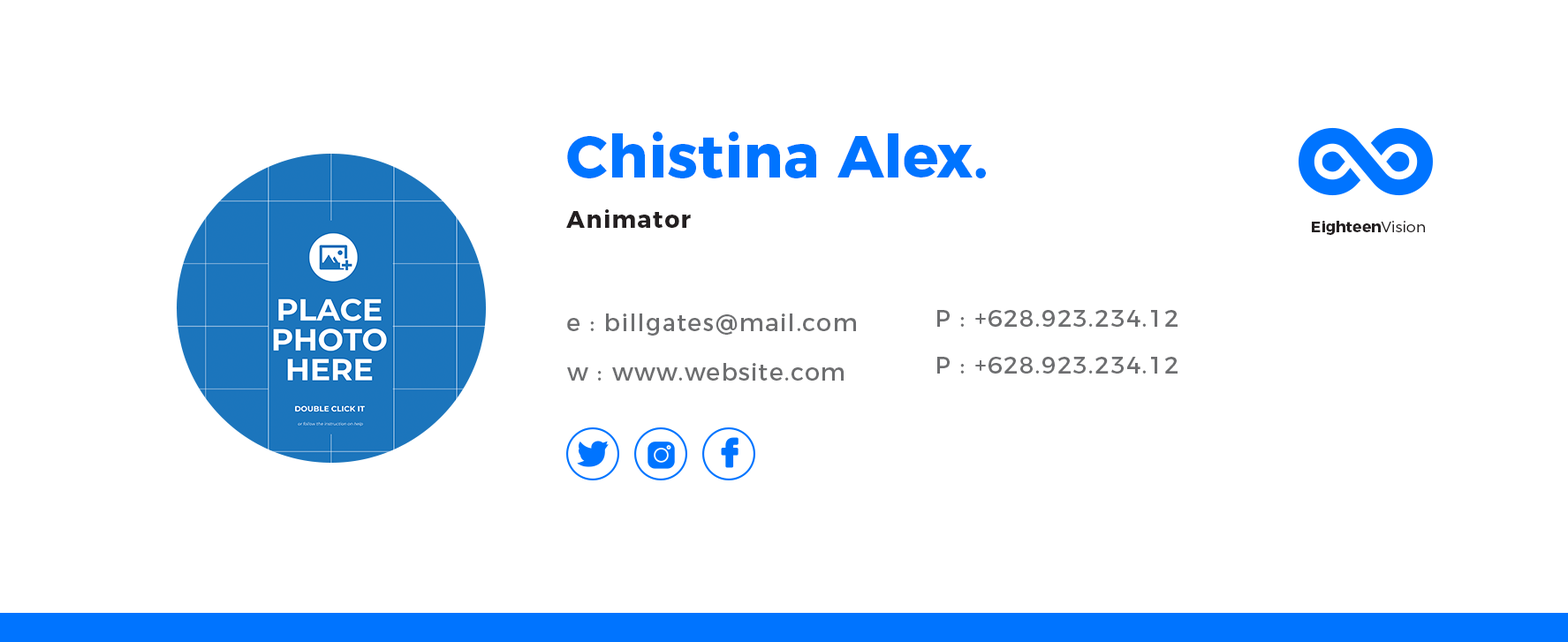
<style>
.page{position:relative;width:1568px;height:642px;background:#ffffff}
.page>*{position:absolute;margin:0}
.t1{font:59.8px "Montserrat-Bold";color:#0074ff}
.t2{font:23.6px "Montserrat-Bold";letter-spacing:0.05em;color:#231f20}
.t3{font:15.2px "Montserrat-Bold";color:#231f20}
.t4{font:15.2px "Montserrat-Light";color:#231f20}
.t5{font:23.6px "Montserrat-Regular";letter-spacing:0.05em;color:#6d6e70}
</style>
<div class="page">
<p class="t1" style="left:567px;top:132px;width:419px;height:46px">Chistina Alex.</p>
<p class="t2" style="left:566px;top:209px;width:125px;height:19px">Animator</p>
<p class="t3" style="left:1312px;top:221px;width:113px;height:14px">Eighteen<span class="t4">Vision</span></p>
<p class="t5" style="left:567px;top:314px;width:289px;height:22px">e : billgates@mail.com</p>
<p class="t5" style="left:937px;top:310px;width:241px;height:17px">P : +628.923.234.12</p>
<p class="t5" style="left:567px;top:363px;width:277px;height:18px">w : www.website.com</p>
<p class="t5" style="left:937px;top:357px;width:241px;height:17px">P : +628.923.234.12</p>
</div>
